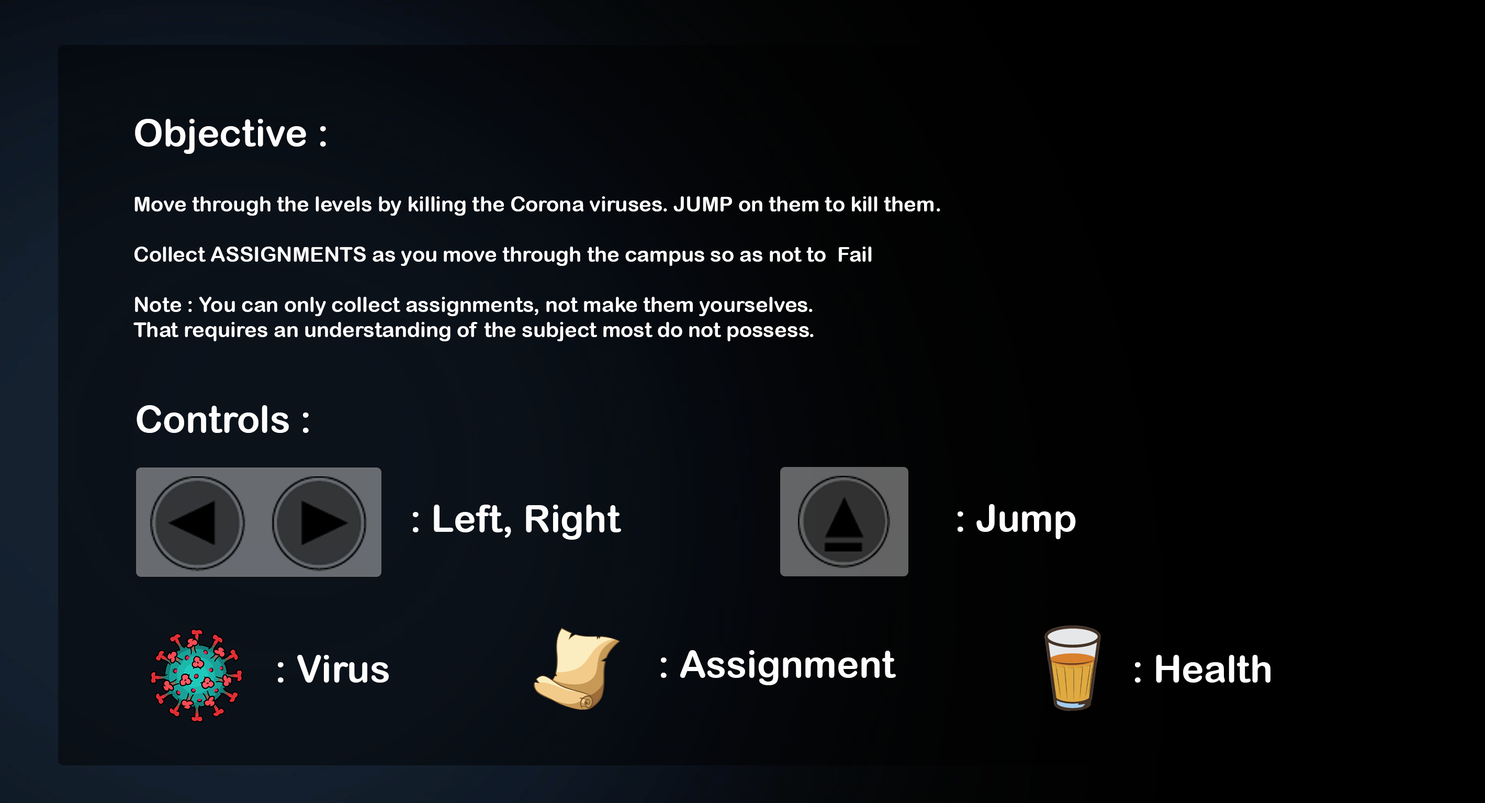
<style>
.page{position:relative;width:1485px;height:803px;background:#000000}
.page>*{position:absolute;margin:0}
.t1{font:37.7px "ArialRoundedMTBold";color:#fffefe}
.t2{font:20.9px "ArialRoundedMTBold";color:#fffefe}
</style>
<div class="page">
<p class="t1" style="left:135px;top:119px;width:191px;height:35px">Objective :</p>
<p class="t2" style="left:133px;top:196px;width:807px;height:145px">Move through the levels by killing the Corona viruses. JUMP on them to kill them. <br><br>Collect ASSIGNMENTS as you move through the campus so as not to  Fail <br><br>Note : You can only collect assignments, not make them yourselves. <br>That requires an understanding of the subject most do not possess.</p>
<p class="t1" style="left:137px;top:405px;width:172px;height:28px">Controls :</p>
<p class="t1" style="left:413px;top:505px;width:208px;height:35px">: Left, Right</p>
<p class="t1" style="left:958px;top:504px;width:118px;height:35px">: Jump</p>
<p class="t1" style="left:661px;top:650px;width:235px;height:35px">: Assignment</p>
<p class="t1" style="left:278px;top:655px;width:111px;height:27px">: Virus</p>
<p class="t1" style="left:1135px;top:655px;width:136px;height:27px">: Health</p>
</div>
